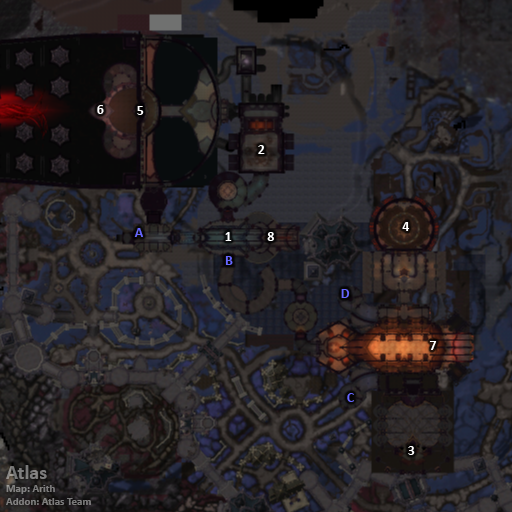
<style>
.page{position:relative;width:512px;height:512px}
.page>*{position:absolute;margin:0}
.t1{font:14px "Calibri-Bold";color:#ffffff}
.t2{font:14px "Calibri-Bold";color:#6666ff}
.t3{font:11px "Calibri-Bold";color:#7d7d7d}
.t4{font:20px "Calibri-Bold";color:#7d7d7d}
</style>
<div class="page">
<p class="t1" style="left:97px;top:105px;width:7px;height:9px">6</p>
<p class="t1" style="left:137px;top:106px;width:7px;height:9px">5</p>
<p class="t1" style="left:258px;top:145px;width:7px;height:9px">2</p>
<p class="t1" style="left:402px;top:222px;width:8px;height:9px">4</p>
<p class="t2" style="left:134px;top:228px;width:9px;height:9px">A</p>
<p class="t1" style="left:225px;top:232px;width:7px;height:9px">1</p>
<p class="t1" style="left:267px;top:232px;width:7px;height:9px">8</p>
<p class="t2" style="left:225px;top:256px;width:8px;height:9px">B</p>
<p class="t2" style="left:341px;top:289px;width:9px;height:9px">D</p>
<p class="t1" style="left:429px;top:341px;width:8px;height:9px">7</p>
<p class="t2" style="left:347px;top:393px;width:7px;height:9px">C</p>
<p class="t1" style="left:408px;top:446px;width:7px;height:9px">3</p>
<p class="t3" style="left:6px;top:465px;width:85px;height:40px"><span class="t4">Atlas<br></span>Map: Arith<br>Addon: Atlas Team</p>
</div>
